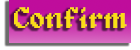
<style>
.page{position:relative;width:140px;height:50px}
.page>*{position:absolute;margin:0}
.t1{font:30px "Alagard";color:#fadd17}
</style>
<div class="page">
<p class="t1" style="left:14px;top:7px;width:113px;height:21px">Confirm</p>
</div>
